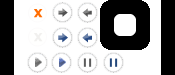
<style>
.page{position:relative;width:175px;height:75px;background:#ffffff}
.page>*{position:absolute;margin:0}
.t1{font:11px "Verdana-Bold";color:#ff6c00;font-weight:bold}
.t2{font:11px "Verdana-Bold";color:#f1f0ee;font-weight:bold}
</style>
<div class="page">
<p class="t1" style="left:34px;top:9px;width:9px;height:9px">X</p>
<p class="t2" style="left:34px;top:33px;width:9px;height:9px">X</p>
</div>
